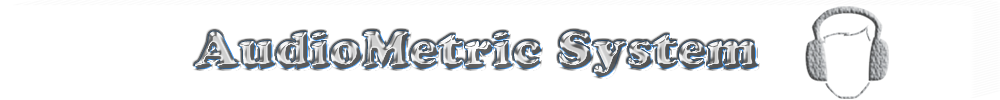
<style>
.page{position:relative;width:1000px;height:100px;background:#ffffff}
.page>*{position:absolute;margin:0}
.t1{font:49.9px "CooperBlackStd";letter-spacing:0.02em}
</style>
<div class="page">
<p class="t1" style="left:195px;top:31px;width:562px;height:45px">AudioMetric System</p>
</div>
